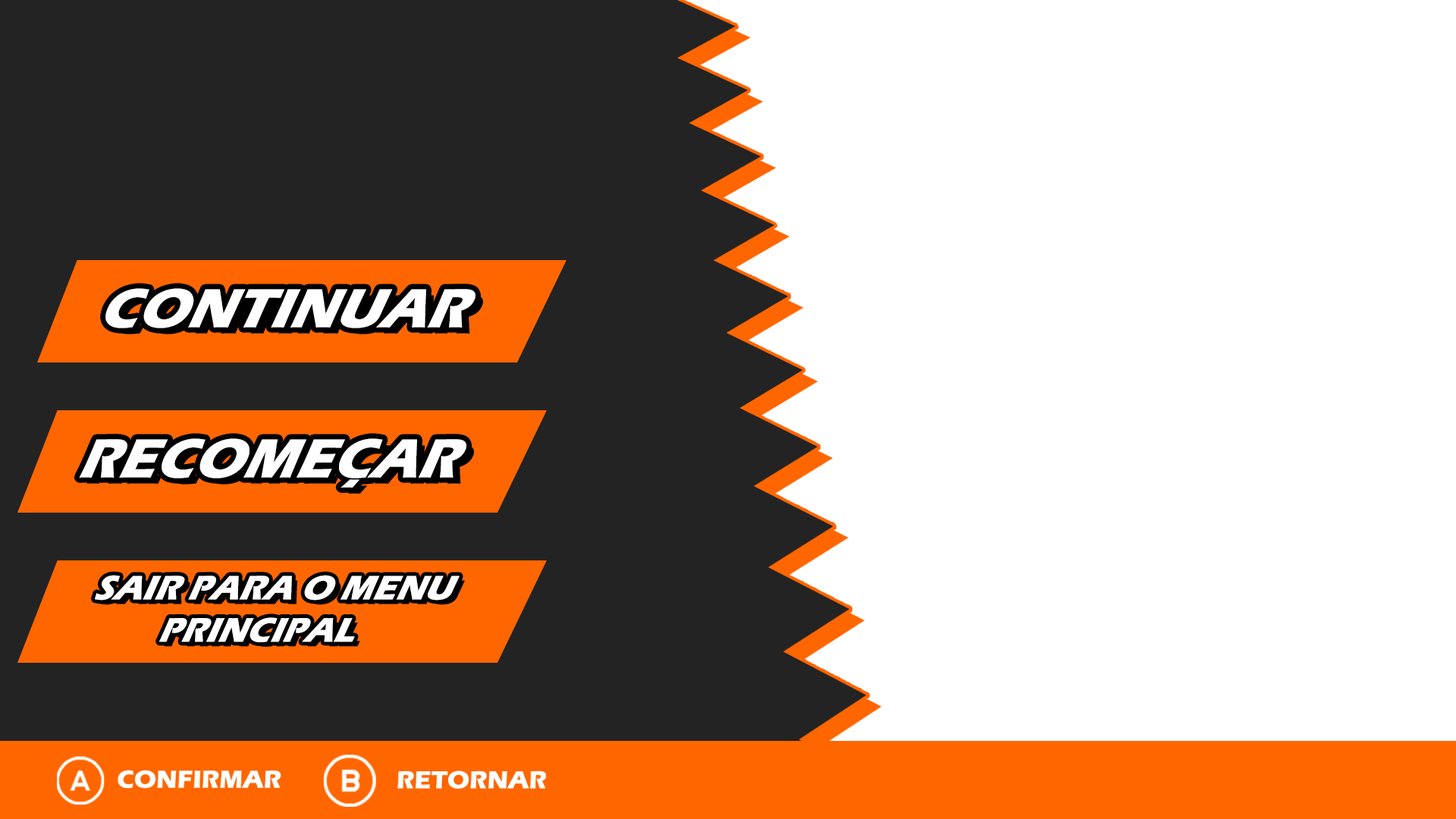
<style>
.page{position:relative;width:1456px;height:819px;background:#ffffff}
.page>*{position:absolute;margin:0}
.t1{font:61.3px "ErasITC-Bold";color:#ffffff;scale:0.93 1}
.t2{font:37.9px "ErasITC-Bold";color:#ffffff;scale:0.93 1}
</style>
<div class="page">
<p class="t1" style="left:105px;top:288px;width:370px;height:40px">CONTINUAR</p>
<p class="t1" style="left:79px;top:438px;width:387px;height:50px">RECOMEÇAR</p>
<p class="t2" style="left:95px;top:575px;width:365px;height:67px;text-align:center">SAIR PARA O MENU PRINCIPAL</p>
</div>
